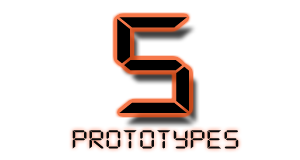
<style>
.page{position:relative;width:300px;height:160px;background:#ffffff}
.page>*{position:absolute;margin:0}
.t1{font:150.7px "DS-Digital";letter-spacing:-0.02em;color:#000000;scale:1.25 1}
.t2{font:28.7px "DS-Digital";letter-spacing:-0.02em;color:#090909;scale:1.25 1}
</style>
<div class="page">
<p class="t1" style="left:117px;top:17px;width:72px;height:96px">5</p>
<p class="t2" style="left:72px;top:130px;width:167px;height:19px">prototypes</p>
</div>
